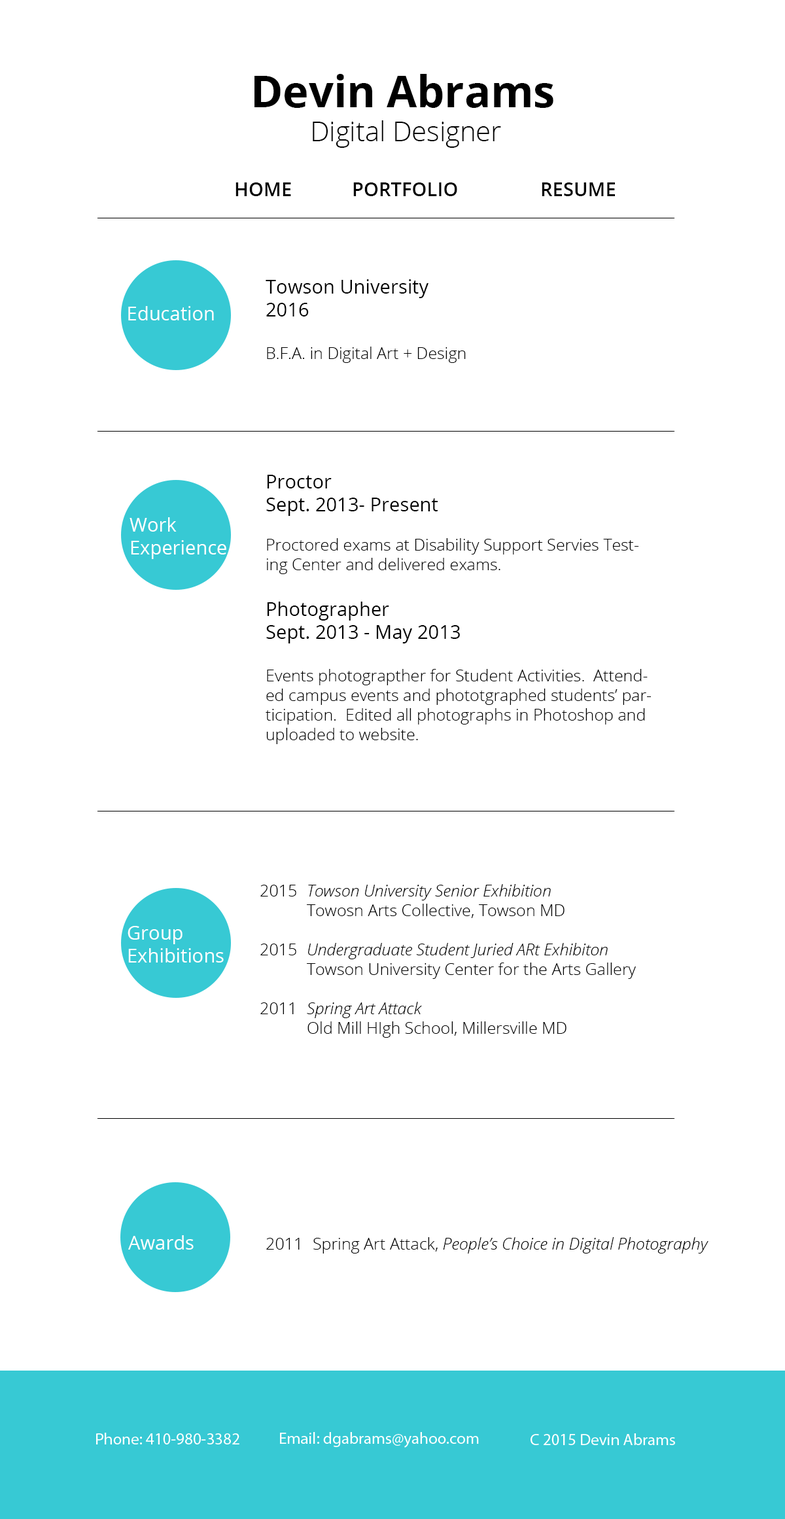
<style>
.page{position:relative;width:785px;height:1519px;background:#ffffff}
.page>*{position:absolute;margin:0}
.t1{font:43.6px "OpenSans-Bold";color:#000000}
.t2{font:27.3px "OpenSans-Light";color:#000000}
.t3{font:19.1px "OpenSans-Semibold";color:#000000}
.t4{font:16.4px "OpenSans-Light";color:#000000}
.t5{font:19.1px "OpenSans";color:#000000}
.t6{font:19.1px "OpenSans";color:#ffffff}
.t7{font:16.4px "OpenSansLight-Italic";color:#000000}
</style>
<div class="page">
<p class="t1" style="left:254px;top:74px;width:299px;height:34px">Devin Abrams</p>
<p class="t2" style="left:313px;top:120px;width:188px;height:28px">Digital Designer</p>
<p class="t3" style="left:235px;top:182px;width:380px;height:14px">HOME   PORTFOLIO    RESUME</p>
<p class="t4" style="left:266px;top:279px;width:200px;height:84px"><span class="t5">Towson University<br>2016<br><br></span>B.F.A. in Digital Art + Design</p>
<p class="t6" style="left:128px;top:306px;width:86px;height:14px">Education</p>
<p class="t4" style="left:266px;top:475px;width:385px;height:269px"><span class="t5">Proctor<br>Sept. 2013- Present<br></span><br>Proctored exams at Disability Support Servies Testing Center and delivered exams.<br><span class="t5"><br>Photographer<br>Sept. 2013 - May 2013<br><br></span>Events photograpther for Student Activities.  Attended campus events and phototgraphed students’ participation.  Edited all photographs in Photoshop and uploaded to website.</p>
<p class="t6" style="left:129px;top:517px;width:97px;height:42px">Work<br>Experience</p>
<p class="t4" style="left:260px;top:884px;width:376px;height:154px">2015 <span class="t7">Towson University Senior Exhibition<br></span>  Towosn Arts Collective, Towson MD<br><br>2015 <span class="t7">Undergraduate Student Juried ARt Exhibiton<br></span>  Towson University Center for the Arts Gallery<br><br>2011 <span class="t7">Spring Art Attack<br></span>  Old Mill HIgh School, Millersville MD</p>
<p class="t6" style="left:128px;top:926px;width:96px;height:37px">Group <br>Exhibitions</p>
<p class="t6" style="left:128px;top:1235px;width:66px;height:15px">Awards</p>
<p class="t7" style="left:266px;top:1237px;width:442px;height:17px"><span class="t4">2011 Spring Art Attack,</span> People’s Choice in Digital Photography</p>
</div>
